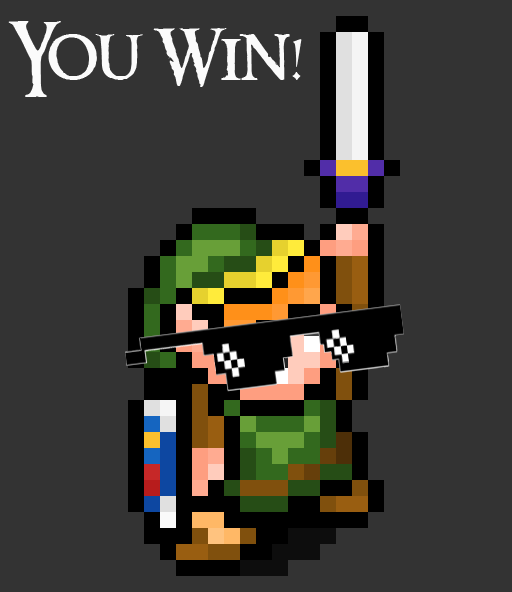
<style>
.page{position:relative;width:512px;height:592px;background:#333333}
.page>*{position:absolute;margin:0}
.t1{font:72.3px "RingbearerMedium";color:#fbfbfb}
</style>
<div class="page">
<p class="t1" style="left:8px;top:21px;width:294px;height:76px">You Win!</p>
</div>
